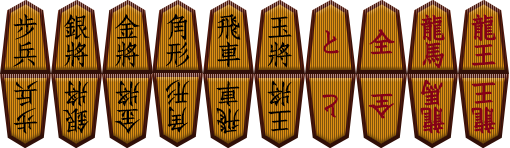
<style>
.page{position:relative;width:510px;height:148px}
.page>*{position:absolute;margin:0}
.t1{font:27.6px/27.6px "DFFangSong-W6-WINP-BF";letter-spacing:0.04em;color:#000000}
.t2{font:27.5px/27.5px "DFFangSong-W6-WINP-BF";letter-spacing:0.04em;color:#000000;scale:1.03 1}
.t3{font:27.5px/27.5px "DFFangSong-W6-WINP-BF";letter-spacing:0.04em;color:#850117;font-weight:bold}
.t4{font:27.6px/27.6px "DFFangSong-W6-WINP-BF";letter-spacing:0.04em;color:#860117;font-weight:bold}
.t5{font:27.6px "DFFangSong-W6-WINP-BF";letter-spacing:0.04em;color:#850117;font-weight:bold}
.t6{font:27.5px/27.5px "DFFangSong-W6-WINP-BF";letter-spacing:0.04em;color:#000000}
.t7{font:27.4px "DFFangSong-W6-WINP-BF";letter-spacing:0.04em;color:#000000}
.t8{font:27.4px "DFFangSong-W6-WINP-BF";letter-spacing:0.04em;color:#000000;scale:1.04 1}
.t9{font:27.3px "DFFangSong-W6-WINP-BF";letter-spacing:0.04em;color:#000000;scale:1.03 1}
.t10{font:27.4px "DFFangSong-W6-WINP-BF";letter-spacing:0.04em;color:#000000;scale:1.03 1}
.t11{font:27.4px "DFFangSong-W6-WINP-BF";letter-spacing:0.04em;color:#850117;font-weight:bold}
.t12{font:27.5px "DFFangSong-W6-WINP-BF";letter-spacing:0.04em;color:#860117;font-weight:bold}
.t13{font:27.4px "DFFangSong-W6-WINP-BF";letter-spacing:0.04em;color:#850117;font-weight:bold;scale:1.04 1}
</style>
<div class="page">
<p class="t1" style="left:13px;top:13px;width:24px;height:54px">步<br>兵</p>
<p class="t1" style="left:64px;top:14px;width:26px;height:54px">銀將</p>
<p class="t1" style="left:115px;top:13px;width:25px;height:55px">金將</p>
<p class="t1" style="left:165px;top:13px;width:25px;height:54px">角形</p>
<p class="t1" style="left:217px;top:13px;width:24px;height:55px">飛車</p>
<p class="t2" style="left:267px;top:16px;width:25px;height:52px">玉將</p>
<p class="t3" style="left:420px;top:14px;width:25px;height:55px">龍馬</p>
<p class="t4" style="left:471px;top:14px;width:25px;height:52px">龍王</p>
<p class="t5" style="left:323px;top:30px;width:16px;height:24px">と</p>
<p class="t5" style="left:369px;top:29px;width:26px;height:26px">全</p>
<p class="t6" style="left:13px;top:81px;width:25px;height:53px;rotate:180deg">步<br>兵</p>
<p class="t7" style="left:63px;top:80px;width:26px;height:54px;rotate:180deg">銀將</p>
<p class="t8" style="left:114px;top:80px;width:26px;height:54px;rotate:180deg">金將</p>
<p class="t9" style="left:165px;top:79px;width:25px;height:54px;rotate:180deg">角形</p>
<p class="t7" style="left:216px;top:80px;width:24px;height:54px;rotate:180deg">飛車</p>
<p class="t10" style="left:267px;top:80px;width:25px;height:52px;rotate:180deg">王將</p>
<p class="t11" style="left:420px;top:79px;width:25px;height:55px;rotate:180deg">龍馬</p>
<p class="t12" style="left:471px;top:82px;width:25px;height:52px;rotate:180deg">龍王</p>
<p class="t11" style="left:322px;top:94px;width:16px;height:24px;rotate:180deg">と</p>
<p class="t13" style="left:368px;top:93px;width:26px;height:26px;rotate:180deg">全</p>
</div>
